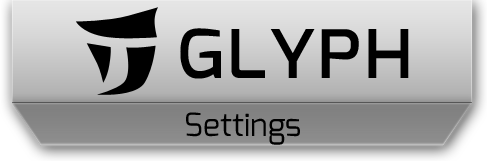
<style>
.page{position:relative;width:487px;height:161px}
.page>*{position:absolute;margin:0}
.t1{font:85.8px "Exo-Medium";color:#000000;font-variant:small-caps}
.t2{font:32px "Exo-Regular";color:#000000}
</style>
<div class="page">
<p class="t1" style="left:180px;top:28px;width:229px;height:51px">glyph</p>
<p class="t2" style="left:186px;top:112px;width:114px;height:33px">Settings</p>
</div>
